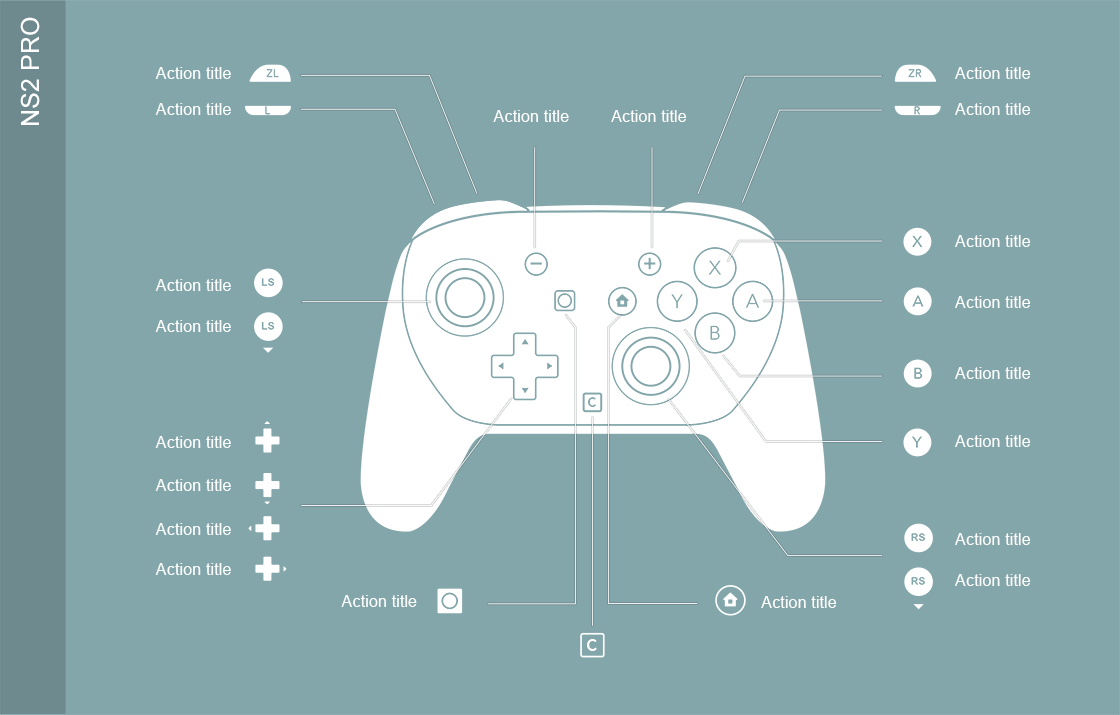
<style>
.page{position:relative;width:1120px;height:715px;background:#83a6aa}
.page>*{position:absolute;margin:0}
.t1{font:25px "ArialMT";color:#ffffff}
.t2{font:16.4px "ArialMT";color:#ffffff}
.t3{font:16.7px "Avenir-Heavy";color:#ffffff;scale:0.91 1}
</style>
<div class="page">
<p class="t1" style="left:20px;top:17px;width:20px;height:108px;rotate:-90deg">NS2 PRO</p>
<p class="t2" style="left:155px;top:67px;width:76px;height:12px">Action title</p>
<p class="t2" style="left:955px;top:67px;width:76px;height:12px">Action title</p>
<p class="t2" style="left:155px;top:103px;width:76px;height:12px">Action title</p>
<p class="t2" style="left:493px;top:110px;width:76px;height:12px">Action title</p>
<p class="t2" style="left:611px;top:110px;width:76px;height:12px">Action title</p>
<p class="t2" style="left:955px;top:103px;width:76px;height:12px">Action title</p>
<p class="t2" style="left:955px;top:235px;width:76px;height:12px">Action title</p>
<p class="t2" style="left:155px;top:279px;width:76px;height:12px">Action title</p>
<p class="t2" style="left:955px;top:296px;width:76px;height:12px">Action title</p>
<p class="t2" style="left:155px;top:320px;width:76px;height:12px">Action title</p>
<p class="t2" style="left:955px;top:367px;width:76px;height:12px">Action title</p>
<p class="t2" style="left:155px;top:436px;width:76px;height:12px">Action title</p>
<p class="t2" style="left:955px;top:435px;width:76px;height:12px">Action title</p>
<p class="t2" style="left:155px;top:479px;width:76px;height:12px">Action title</p>
<p class="t2" style="left:155px;top:523px;width:76px;height:12px">Action title</p>
<p class="t2" style="left:955px;top:533px;width:76px;height:12px">Action title</p>
<p class="t2" style="left:155px;top:563px;width:76px;height:12px">Action title</p>
<p class="t2" style="left:955px;top:574px;width:76px;height:12px">Action title</p>
<p class="t2" style="left:341px;top:595px;width:76px;height:12px">Action title</p>
<p class="t2" style="left:761px;top:596px;width:76px;height:12px">Action title</p>
<p class="t3" style="left:587px;top:639px;width:10px;height:12px">C</p>
</div>
